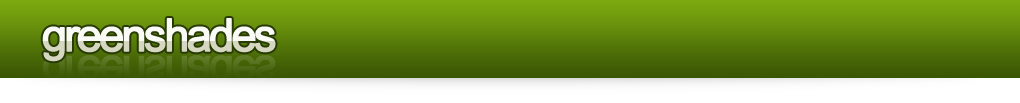
<style>
.page{position:relative;width:1020px;height:103px}
.page>*{position:absolute;margin:0}
.t1{font:45px "ArialMT";letter-spacing:-0.08em;font-weight:bold}
</style>
<div class="page">
<p class="t1" style="left:42px;top:18px;width:234px;height:44px">greenshades</p>
</div>
